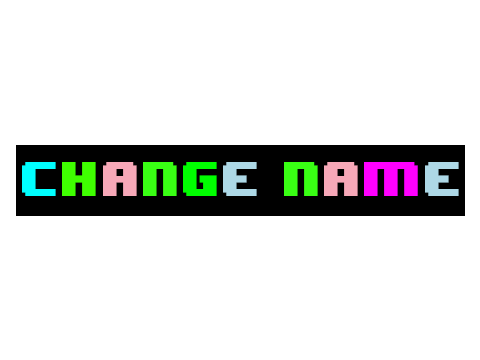
<style>
.page{position:relative;width:480px;height:360px;background:#ffffff}
.page>*{position:absolute;margin:0}
.t1{font:40.2px "8BITWONDERNominal";color:#00ffff}
.t2{font:40.2px "8BITWONDERNominal";color:#3fff00}
.t3{font:40.2px "8BITWONDERNominal";color:#f7a8b8}
.t4{font:40.2px "8BITWONDERNominal";color:#39ff14}
.t5{font:40.2px "8BITWONDERNominal";color:#00ff00}
.t6{font:40.2px "8BITWONDERNominal";color:#add8e6}
.t7{font:40.2px "8BITWONDERNominal";color:#ff00ff}
</style>
<div class="page">
<p class="t1" style="left:22px;top:162px;width:437px;height:34px">c<span class="t2">h</span><span class="t3">a</span><span class="t4">n</span><span class="t5">g</span><span class="t6">e </span><span class="t4">n</span><span class="t3">a</span><span class="t7">m</span><span class="t6">e</span></p>
</div>
